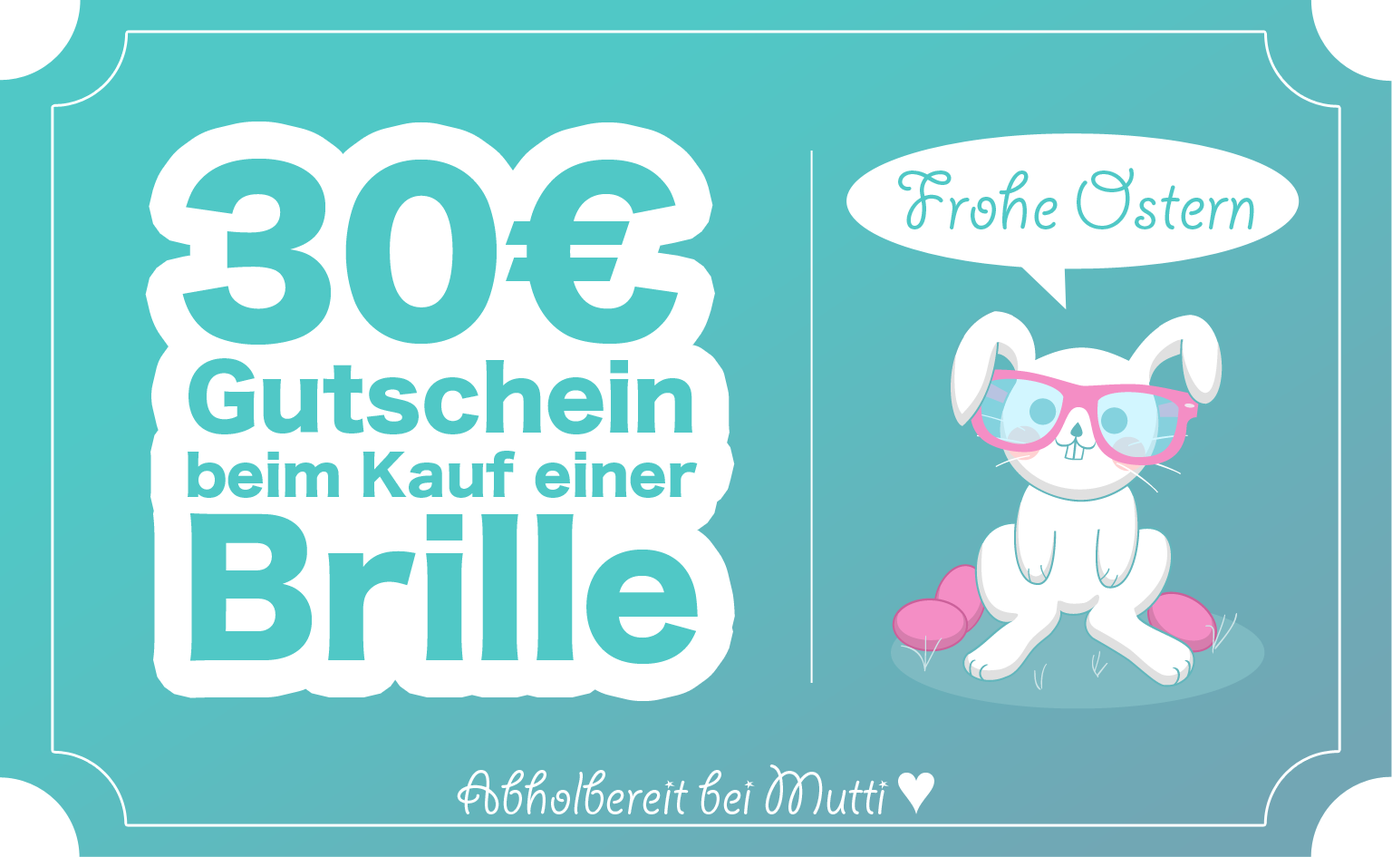
<style>
.page{position:relative;width:1392px;height:857px;background:#ffffff}
.page>*{position:absolute;margin:0}
.t1{font:54.8px "HiraKakuStdN-W8";color:#50c8c6}
.t2{font:64.2px "HiraKakuStdN-W8";color:#50c8c6}
.t3{font:213px "HiraKakuStdN-W8";color:#50c8c6}
.t4{font:87.5px/96.3px "HiraKakuStdN-W8";color:#50c8c6}
.t5{font:175.1px/159.5px "HiraKakuStdN-W8";color:#50c8c6}
.t6{font:90.6px "GiddyupStd";color:#50c8c6}
.t7{font:68px "GiddyupStd";color:#ffffff}
.t8{font:68px "ArialNarrow";color:#ffffff}
</style>
<div class="page">
<p class="t1" style="left:182px;top:159px;width:516px;height:504px;text-align:center"><span class="t2"> </span><span class="t3">30€ <br></span><span class="t4">Gutschein<br></span>beim Kauf einer<br><span class="t5">Brille</span></p>
<p class="t6" style="left:898px;top:168px;width:356px;height:61px">Frohe Ostern</p>
<p class="t7" style="left:457px;top:764px;width:477px;height:50px">Abholbereit bei Mutti <span class="t8">♥</span></p>
</div>
